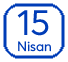
<style>
.page{position:relative;width:68px;height:62px;background:#ffffff}
.page>*{position:absolute;margin:0}
.t1{font:13.3px "Averta-Regular";color:#003cb7}
.t2{font:36px "Averta-Regular";color:#003cb7}
</style>
<div class="page">
<p class="t1" style="left:17px;top:10px;width:34px;height:42px"><span class="t2">15<br></span>Nisan</p>
</div>
